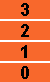
<style>
.page{position:relative;width:50px;height:82px;background:#f8682c}
.page>*{position:absolute;margin:0}
.t1{font:18px "Arial-BoldMT";color:#000000}
</style>
<div class="page">
<p class="t1" style="left:21px;top:3px;width:8px;height:13px">3</p>
<p class="t1" style="left:21px;top:24px;width:8px;height:13px">2</p>
<p class="t1" style="left:21px;top:45px;width:6px;height:13px">1</p>
<p class="t1" style="left:21px;top:66px;width:8px;height:13px">0</p>
</div>
